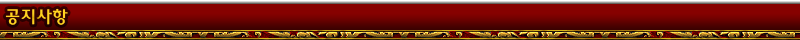
<style>
.page{position:relative;width:800px;height:40px;background:#860100}
.page>*{position:absolute;margin:0}
.t1{font:18px "2002L";letter-spacing:0.025em;color:#f8c619}
</style>
<div class="page">
<p class="t1" style="left:5px;top:8px;width:63px;height:17px">공지사항</p>
</div>
